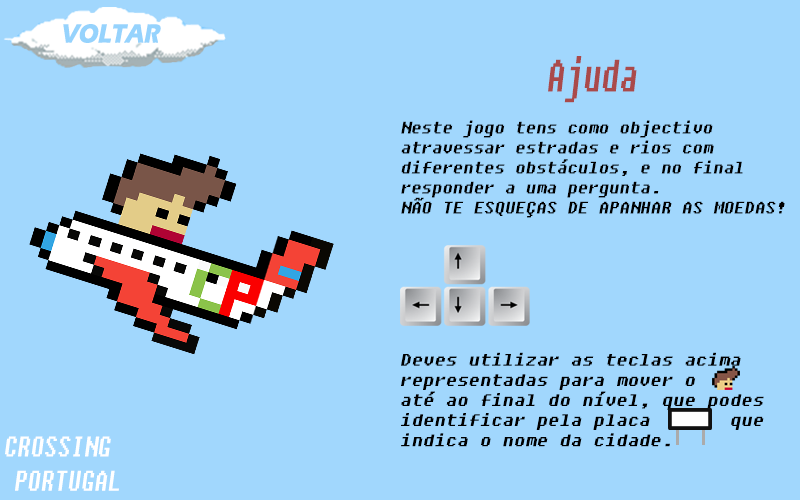
<style>
.page{position:relative;width:800px;height:500px;background:#a1d7fd}
.page>*{position:absolute;margin:0}
.t1{font:27.1px "ErasITC-Bold";color:#96d3fd;font-style:italic;scale:0.83 1}
.t2{font:45.3px "Fixedsys";color:#aa4a4a;font-style:italic;scale:0.64 1}
.t3{font:16.7px "Fixedsys";color:#000000;font-style:italic}
.t4{font:16.7px "Fixedsys";color:#000000;font-style:italic;scale:1.09 1}
.t5{font:28.4px "Fixedsys";color:#ffffff;font-style:italic;scale:0.76 1}
</style>
<div class="page">
<p class="t1" style="left:63px;top:24px;width:98px;height:19px">VOLTAR</p>
<p class="t2" style="left:548px;top:56px;width:89px;height:47px">Ajuda</p>
<p class="t3" style="left:401px;top:120px;width:384px;height:98px">Neste jogo tens como objectivo atravessar estradas e rios com diferentes obstáculos, e no final responder a uma pergunta.<br>NÃO TE ESQUEÇAS DE APANHAR AS MOEDAS!</p>
<p class="t4" style="left:401px;top:352px;width:363px;height:95px">Deves utilizar as teclas acima representadas para mover o <br>até ao final do nível, que podes identificar pela placa       que indica o nome da cidade.</p>
<p class="t5" style="left:5px;top:436px;width:114px;height:55px">CROSSING <br> PORTUGAL</p>
</div>
